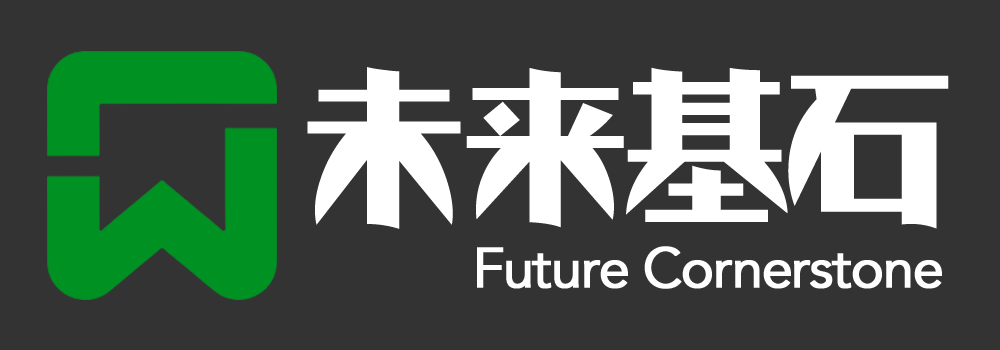
<style>
.page{position:relative;width:1000px;height:350px;background:#333333}
.page>*{position:absolute;margin:0}
.t1{font:161.5px "ShowaModern";color:#ffffff}
.t2{font:56px "Avenir-Roman";letter-spacing:-0.05em;color:#ffffff;font-weight:bold}
</style>
<div class="page">
<p class="t1" style="left:307px;top:67px;width:642px;height:162px">未来基石</p>
<p class="t2" style="left:477px;top:246px;width:465px;height:43px">Future Cornerstone</p>
</div>
